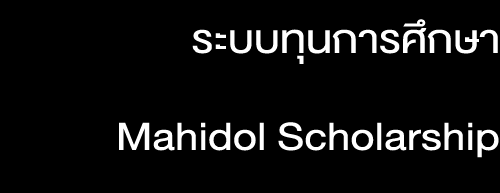
<style>
.page{position:relative;width:500px;height:193px;background:#000000}
.page>*{position:absolute;margin:0}
.t1{font:55px "DBHelvethaicaX-55Regular";color:#ffffff;scale:1.13 1}
</style>
<div class="page">
<p class="t1" style="left:192px;top:19px;width:306px;height:45px">ระบบทุนการศึกษา</p>
<p class="t1" style="left:119px;top:122px;width:380px;height:36px">Mahidol Scholarship</p>
</div>
